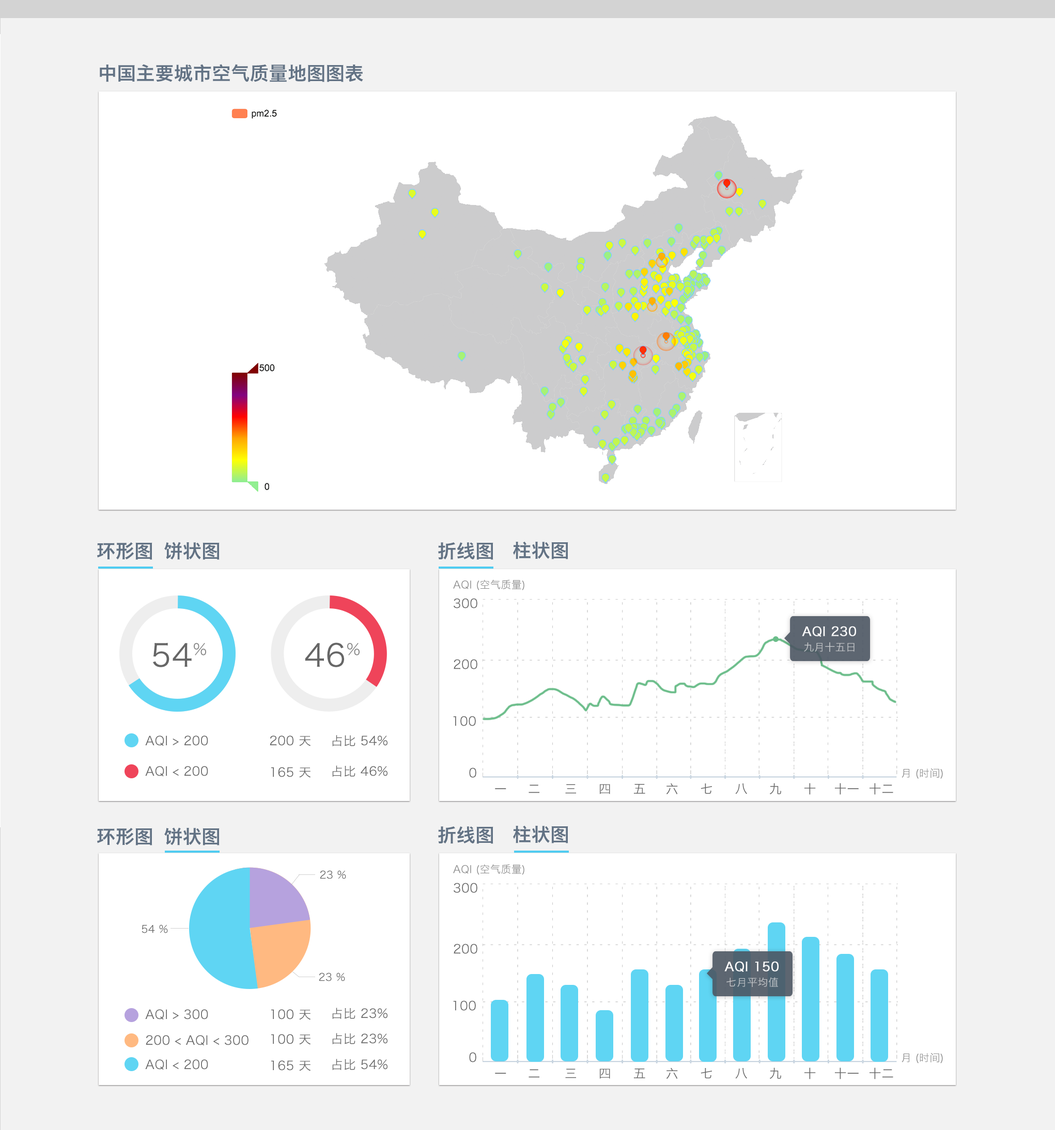
<style>
.page{position:relative;width:1055px;height:1130px;background:#ffffff}
.page>*{position:absolute;margin:0}
.t1{font:18.6px "HiraginoSansGB-W6";letter-spacing:0.02em;color:#617284}
.t2{font:10.3px "HiraginoSansGB-W3";letter-spacing:0.02em;color:#888888}
.t3{font:12.4px "HiraginoSansGB-W3";letter-spacing:0.02em;color:#666666}
.t4{font:12.4px "HiraginoSansGB-W3";letter-spacing:0.02em;color:#ffffff;font-weight:bold}
.t5{font:31px "HiraginoSansGB-W3";letter-spacing:0.02em;color:#666666}
.t6{font:15.5px "HiraginoSansGB-W3";letter-spacing:0.02em;color:#888888}
.t7{font:10.3px "HiraginoSansGB-W3";letter-spacing:0.02em;color:#c8cbce}
.t8{font:10.3px "HiraginoSansGB-W3";letter-spacing:0.02em;color:#666666}
</style>
<div class="page">
<p class="t1" style="left:100px;top:64px;width:263px;height:18px">中国主要城市空气质量地图图表</p>
<p class="t1" style="left:97px;top:542px;width:55px;height:18px">环形图</p>
<p class="t1" style="left:164px;top:542px;width:56px;height:18px">饼状图</p>
<p class="t1" style="left:438px;top:542px;width:55px;height:18px">折线图</p>
<p class="t1" style="left:513px;top:541px;width:55px;height:18px">柱状图</p>
<p class="t2" style="left:453px;top:580px;width:71px;height:10px">AQI (空气质量)</p>
<p class="t3" style="left:454px;top:598px;width:23px;height:11px">300</p>
<p class="t4" style="left:802px;top:626px;width:54px;height:11px">AQI 230</p>
<p class="t5" style="left:153px;top:643px;width:39px;height:24px">54</p>
<p class="t6" style="left:194px;top:643px;width:12px;height:13px">％</p>
<p class="t5" style="left:305px;top:643px;width:39px;height:24px">46</p>
<p class="t6" style="left:347px;top:643px;width:13px;height:13px">％</p>
<p class="t7" style="left:804px;top:642px;width:50px;height:10px">九月十五日</p>
<p class="t3" style="left:454px;top:659px;width:23px;height:11px">200</p>
<p class="t3" style="left:453px;top:716px;width:23px;height:10px">100</p>
<p class="t3" style="left:145px;top:736px;width:63px;height:11px">AQI &gt; 200</p>
<p class="t3" style="left:270px;top:736px;width:41px;height:11px">200 天</p>
<p class="t3" style="left:332px;top:735px;width:55px;height:12px">占比 54%</p>
<p class="t3" style="left:145px;top:766px;width:63px;height:11px">AQI &lt; 200</p>
<p class="t3" style="left:271px;top:767px;width:40px;height:11px">165 天</p>
<p class="t3" style="left:332px;top:766px;width:55px;height:11px">占比 46%</p>
<p class="t3" style="left:469px;top:768px;width:7px;height:10px">0</p>
<p class="t2" style="left:901px;top:768px;width:42px;height:11px">月 (时间)</p>
<p class="t3" style="left:528px;top:785px;width:11px;height:9px">二</p>
<p class="t3" style="left:565px;top:784px;width:11px;height:10px">三</p>
<p class="t3" style="left:599px;top:784px;width:11px;height:11px">四</p>
<p class="t3" style="left:634px;top:784px;width:11px;height:10px">五</p>
<p class="t3" style="left:666px;top:783px;width:12px;height:12px">六</p>
<p class="t3" style="left:701px;top:784px;width:11px;height:10px">七</p>
<p class="t3" style="left:735px;top:784px;width:12px;height:11px">八</p>
<p class="t3" style="left:769px;top:783px;width:12px;height:12px">九</p>
<p class="t3" style="left:804px;top:783px;width:12px;height:12px">十</p>
<p class="t3" style="left:835px;top:783px;width:24px;height:12px">十一</p>
<p class="t3" style="left:869px;top:783px;width:24px;height:12px">十二</p>
<p class="t3" style="left:495px;top:788px;width:11px;height:2px">一</p>
<p class="t1" style="left:97px;top:828px;width:55px;height:18px">环形图</p>
<p class="t1" style="left:164px;top:828px;width:56px;height:18px">饼状图</p>
<p class="t1" style="left:438px;top:827px;width:55px;height:17px">折线图</p>
<p class="t1" style="left:513px;top:826px;width:55px;height:18px">柱状图</p>
<p class="t2" style="left:453px;top:864px;width:71px;height:11px">AQI (空气质量)</p>
<p class="t8" style="left:320px;top:870px;width:26px;height:9px">23 %</p>
<p class="t3" style="left:454px;top:883px;width:23px;height:10px">300</p>
<p class="t8" style="left:142px;top:925px;width:26px;height:9px">54 %</p>
<p class="t3" style="left:454px;top:944px;width:23px;height:10px">200</p>
<p class="t4" style="left:724px;top:961px;width:55px;height:11px">AQI 150</p>
<p class="t8" style="left:319px;top:973px;width:26px;height:9px">23 %</p>
<p class="t7" style="left:726px;top:977px;width:52px;height:10px">七月平均值</p>
<p class="t3" style="left:453px;top:1001px;width:23px;height:10px">100</p>
<p class="t3" style="left:145px;top:1009px;width:63px;height:11px">AQI &gt; 300</p>
<p class="t3" style="left:271px;top:1009px;width:40px;height:11px">100 天</p>
<p class="t3" style="left:332px;top:1008px;width:55px;height:11px">占比 23%</p>
<p class="t3" style="left:146px;top:1035px;width:102px;height:11px">200 &lt; AQI &lt; 300</p>
<p class="t3" style="left:271px;top:1034px;width:40px;height:11px">100 天</p>
<p class="t3" style="left:332px;top:1033px;width:55px;height:12px">占比 23%</p>
<p class="t3" style="left:145px;top:1060px;width:63px;height:10px">AQI &lt; 200</p>
<p class="t3" style="left:271px;top:1061px;width:40px;height:10px">165 天</p>
<p class="t3" style="left:332px;top:1059px;width:55px;height:11px">占比 54%</p>
<p class="t3" style="left:469px;top:1052px;width:7px;height:11px">0</p>
<p class="t2" style="left:901px;top:1053px;width:42px;height:11px">月 (时间)</p>
<p class="t3" style="left:495px;top:1073px;width:11px;height:2px">一</p>
<p class="t3" style="left:528px;top:1069px;width:11px;height:9px">二</p>
<p class="t3" style="left:565px;top:1069px;width:11px;height:10px">三</p>
<p class="t3" style="left:599px;top:1069px;width:11px;height:10px">四</p>
<p class="t3" style="left:634px;top:1068px;width:11px;height:11px">五</p>
<p class="t3" style="left:666px;top:1068px;width:12px;height:11px">六</p>
<p class="t3" style="left:701px;top:1068px;width:11px;height:11px">七</p>
<p class="t3" style="left:735px;top:1068px;width:12px;height:11px">八</p>
<p class="t3" style="left:769px;top:1068px;width:12px;height:11px">九</p>
<p class="t3" style="left:804px;top:1068px;width:12px;height:12px">十</p>
<p class="t3" style="left:835px;top:1068px;width:24px;height:12px">十一</p>
<p class="t3" style="left:869px;top:1068px;width:24px;height:12px">十二</p>
</div>
